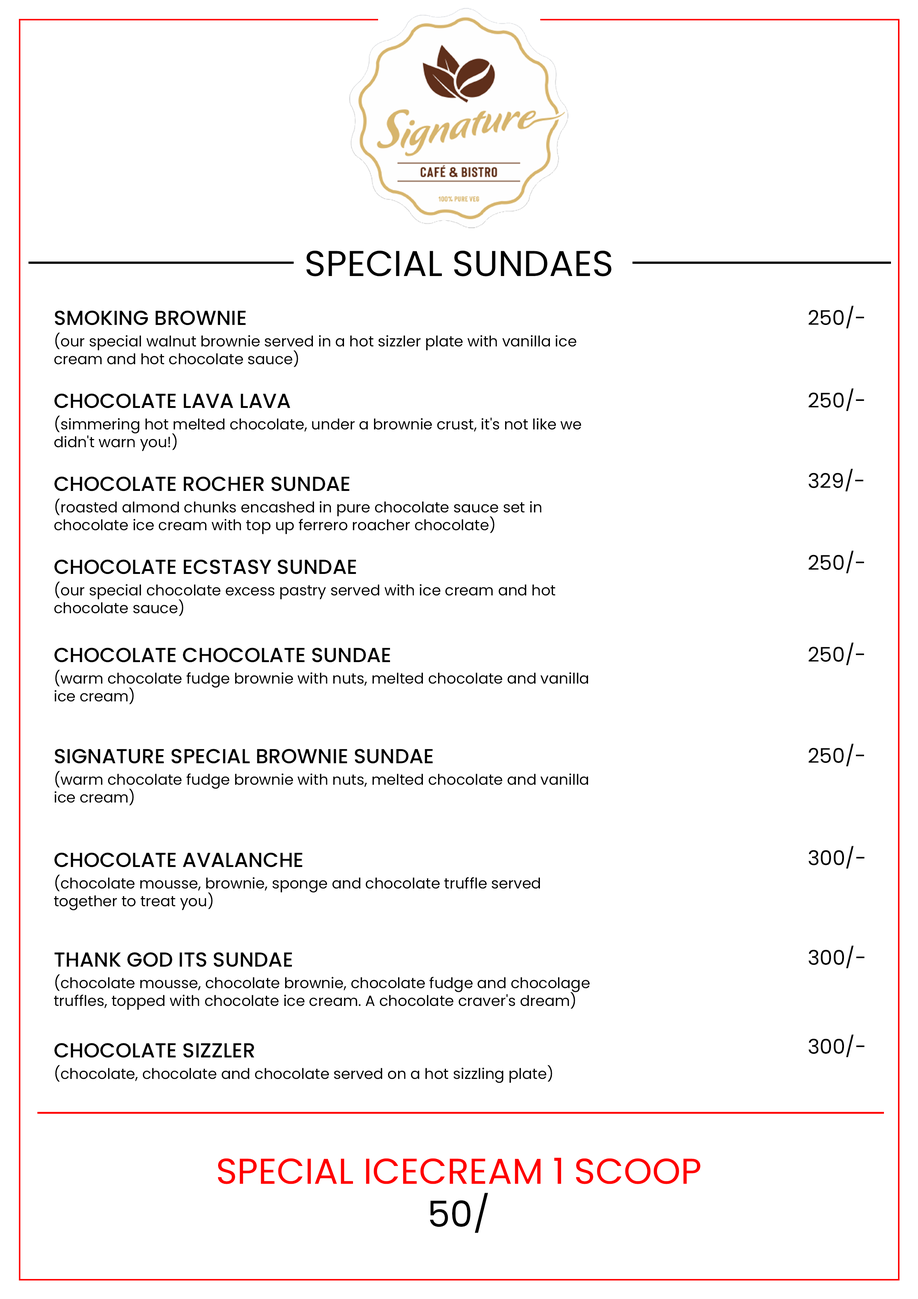
<style>
.page{position:relative;width:918px;height:1299px;background:#ffffff}
.page>*{position:absolute;margin:0}
.t1{font:35.9px "Poppins-Regular";color:#000000;text-transform:uppercase}
.t2{font:20.4px "Poppins-Regular";color:#000000}
.t3{font:14.8px/17.8px "Poppins-Regular";color:#000000}
.t4{font:20.4px/28.7px "Poppins-Medium";color:#000000}
.t5{font:35.9px "Poppins-Regular";color:#ff0000;text-transform:uppercase}
</style>
<div class="page">
<p class="t1" style="left:306px;top:250px;width:306px;height:26px">SPECIAL SUNDAES</p>
<p class="t2" style="left:809px;top:306px;width:56px;height:23px">250/-</p>
<p class="t3" style="left:54px;top:310px;width:523px;height:57px"><span class="t4">SMOKING BROWNIE<br></span>(our special walnut brownie served in a hot sizzler plate with vanilla ice<br>cream and hot chocolate sauce)</p>
<p class="t2" style="left:809px;top:388px;width:56px;height:23px">250/-</p>
<p class="t3" style="left:54px;top:393px;width:528px;height:58px"><span class="t4">CHOCOLATE LAVA LAVA<br></span>(simmering hot melted chocolate, under a brownie crust, it's not like we<br>didn't warn you!)</p>
<p class="t2" style="left:809px;top:469px;width:55px;height:23px">329/-</p>
<p class="t3" style="left:54px;top:476px;width:488px;height:58px"><span class="t4">CHOCOLATE ROCHER SUNDAE<br></span>(roasted almond chunks encashed in pure chocolate sauce set in<br>chocolate ice cream with top up ferrero roacher chocolate)</p>
<p class="t2" style="left:809px;top:550px;width:56px;height:23px">250/-</p>
<p class="t3" style="left:54px;top:559px;width:502px;height:57px"><span class="t4">CHOCOLATE ECSTASY SUNDAE<br></span>(our special chocolate excess pastry served with ice cream and hot<br>chocolate sauce)</p>
<p class="t3" style="left:54px;top:647px;width:534px;height:57px"><span class="t4">CHOCOLATE CHOCOLATE SUNDAE<br></span>(warm chocolate fudge brownie with nuts, melted chocolate and vanilla<br>ice cream)</p>
<p class="t2" style="left:809px;top:642px;width:56px;height:23px">250/-</p>
<p class="t3" style="left:54px;top:749px;width:534px;height:56px"><span class="t4">SIGNATURE SPECIAL BROWNIE SUNDAE<br></span>(warm chocolate fudge brownie with nuts, melted chocolate and vanilla<br>ice cream)</p>
<p class="t2" style="left:809px;top:743px;width:56px;height:23px">250/-</p>
<p class="t2" style="left:809px;top:846px;width:56px;height:23px">300/-</p>
<p class="t3" style="left:54px;top:852px;width:486px;height:58px"><span class="t4">CHOCOLATE AVALANCHE<br></span>(chocolate mousse, brownie, sponge and chocolate truffle served<br>together to treat you)</p>
<p class="t3" style="left:54px;top:952px;width:536px;height:58px"><span class="t4">THANK GOD ITS SUNDAE<br></span>(chocolate mousse, chocolate brownie, chocolate fudge and chocolage<br>truffles, topped with chocolate ice cream. A chocolate craver's dream)</p>
<p class="t2" style="left:809px;top:945px;width:56px;height:23px">300/-</p>
<p class="t2" style="left:809px;top:1034px;width:56px;height:23px">300/-</p>
<p class="t3" style="left:54px;top:1043px;width:498px;height:40px"><span class="t4">CHOCOLATE SIZZLER<br></span>(chocolate, chocolate and chocolate served on a hot sizzling plate)</p>
<p class="t5" style="left:218px;top:1157px;width:483px;height:76px;text-align:center">SPECIAL ICECREAM 1 SCOOP<br><span class="t1">50/</span></p>
</div>
